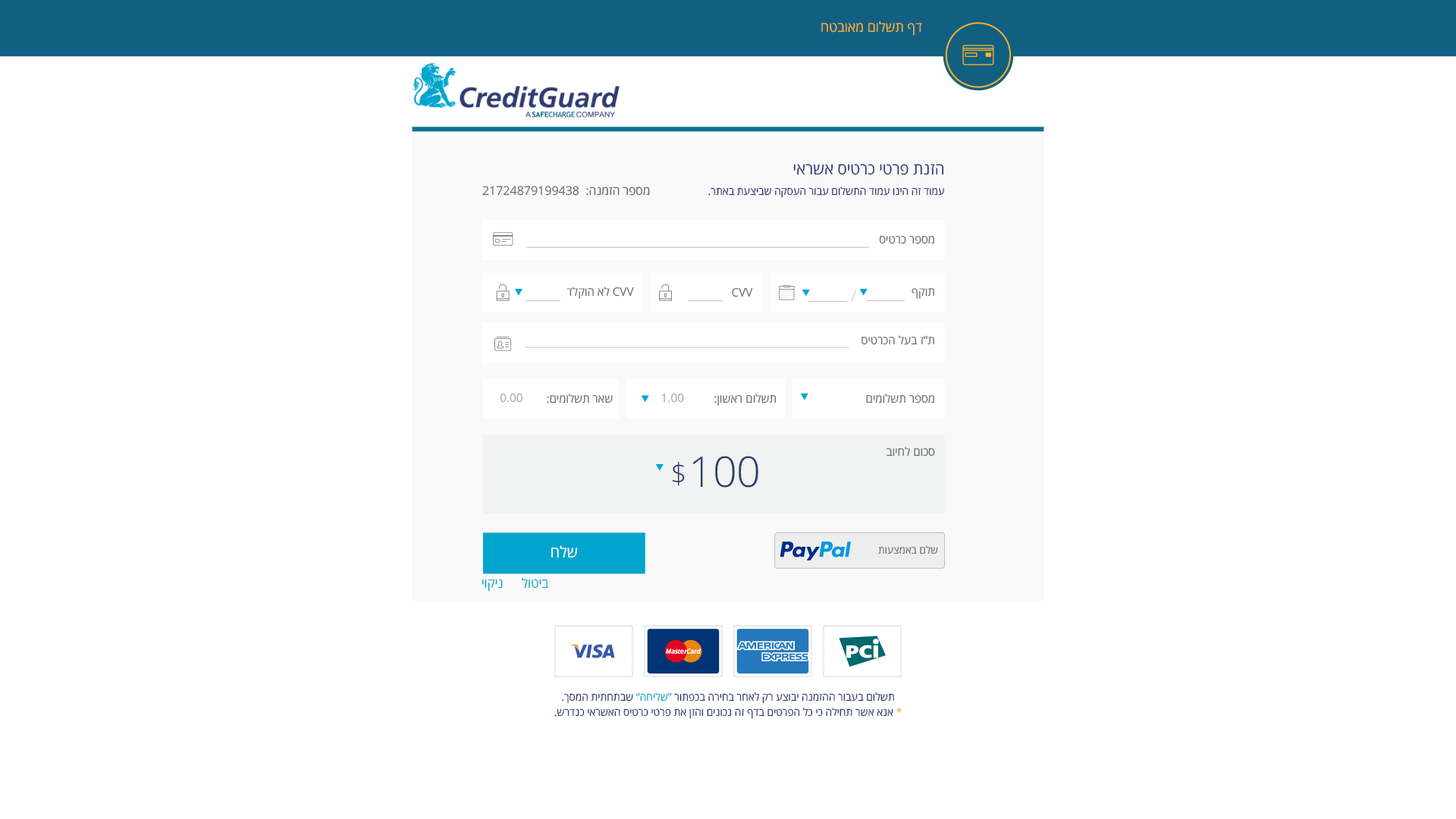
<style>
.page{position:relative;width:1456px;height:819px;background:#ffffff}
.page>*{position:absolute;margin:0}
.t1{font:13.6px "OpenSansHebrew-Regular";color:#faad33}
.t2{font:15.9px "OpenSansHebrew-Regular";color:#303b72}
.t3{font:12.1px "OpenSansHebrew-Regular";color:#6d6e71}
.t4{font:10.6px "OpenSansHebrew-Regular";color:#303b72}
.t5{font:11.6px "OpenSansHebrew-Regular";color:#6d6e71}
.t6{font:14.9px "OpenSansHebrew-Regular";color:#d1d3d4}
.t7{font:11.6px "OpenSansHebrew-Regular";color:#a7a9ac}
.t8{font:28.7px "OpenSansHebrew-Light";color:#303b72}
.t9{font:42.3px "OpenSansHebrew-Light";color:#303b72}
.t10{font:15.2px "OpenSansHebrew-Regular";color:#ffffff}
.t11{font:10.3px "OpenSansHebrew-Regular";color:#6d6e71}
.t12{font:13px "OpenSansHebrew-Regular";color:#00a5ce}
.t13{font:10.6px/15.2px "OpenSansHebrew-Regular";color:#303b72}
.t14{font:10.6px/15.2px "OpenSansHebrew-Regular";color:#00a5ce}
.t15{font:10.6px/15.2px "OpenSansHebrew-Regular";color:#faad33}
</style>
<div class="page">
<p class="t1" style="left:821px;top:21px;width:101px;height:15px">דף תשלום מאובטח</p>
<p class="t2" style="left:793px;top:164px;width:151px;height:11px">הזנת פרטי כרטיס אשראי</p>
<p class="t3" style="left:482px;top:186px;width:168px;height:10px">מספר הזמנה:  21724879199438</p>
<p class="t4" style="left:708px;top:187px;width:236px;height:11px">עמוד זה הינו עמוד התשלום עבור העסקה שביצעת באתר.</p>
<p class="t5" style="left:879px;top:236px;width:55px;height:8px">מספר כרטיס</p>
<p class="t5" style="left:566px;top:287px;width:68px;height:12px">לא הוקלד CVV</p>
<p class="t5" style="left:732px;top:287px;width:21px;height:10px">CVV</p>
<p class="t6" style="left:851px;top:290px;width:6px;height:12px">/</p>
<p class="t5" style="left:912px;top:288px;width:22px;height:11px">תוקף</p>
<p class="t5" style="left:861px;top:335px;width:73px;height:10px">ת”ז בעל הכרטיס</p>
<p class="t7" style="left:500px;top:393px;width:22px;height:10px">0.00</p>
<p class="t5" style="left:547px;top:394px;width:66px;height:9px">שאר תשלומים:</p>
<p class="t7" style="left:661px;top:393px;width:23px;height:10px">1.00</p>
<p class="t5" style="left:714px;top:394px;width:63px;height:12px">תשלום ראשון:</p>
<p class="t5" style="left:866px;top:394px;width:68px;height:9px">מספר תשלומים</p>
<p class="t5" style="left:886px;top:447px;width:49px;height:10px">סכום לחיוב</p>
<p class="t8" style="left:672px;top:462px;width:13px;height:24px">$</p>
<p class="t9" style="left:692px;top:456px;width:66px;height:32px">100</p>
<p class="t10" style="left:551px;top:545px;width:27px;height:13px">שלח</p>
<p class="t11" style="left:878px;top:545px;width:60px;height:9px">שלם באמצעות</p>
<p class="t12" style="left:482px;top:579px;width:21px;height:12px">ניקוי</p>
<p class="t12" style="left:522px;top:578px;width:27px;height:10px">ביטול</p>
<p class="t13" style="left:554px;top:692px;width:348px;height:27px;text-align:center">תשלום בעבור ההזמנה יבוצע רק לאחר בחירה בכפתור<span class="t14"> “שליחה”</span> שבתחתית המסך.<br><span class="t15">*</span> אנא אשר תחילה כי כל הפרטים בדף זה נכונים והזן את פרטי כרטיס האשראי כנדרש.</p>
</div>
